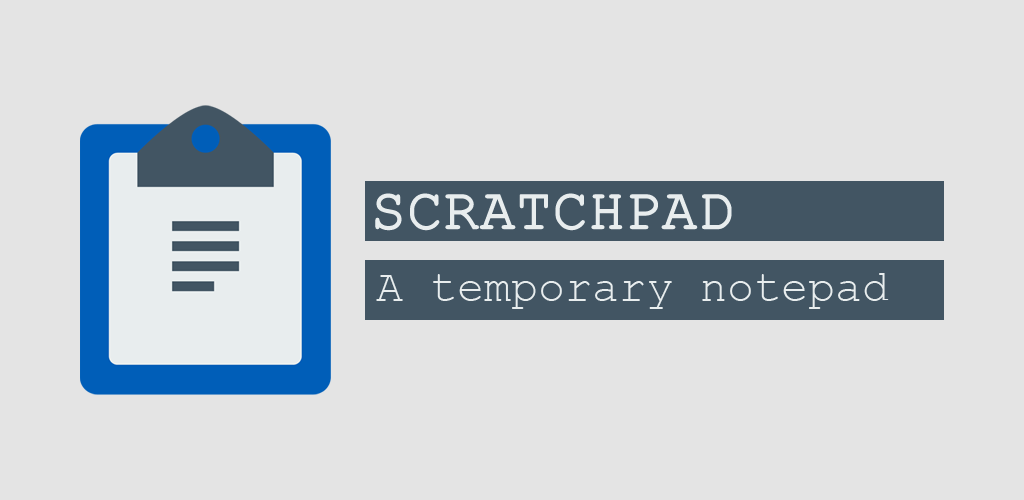
<style>
.page{position:relative;width:1024px;height:500px;background:#e4e4e4}
.page>*{position:absolute;margin:0}
.t1{font:58px "CourierNewPSMT";color:#e8edee;font-weight:bold}
.t2{font:45px "CourierNewPSMT";color:#e8edee}
</style>
<div class="page">
<p class="t1" style="left:375px;top:193px;width:357px;height:38px">SCRATCHPAD</p>
<p class="t2" style="left:376px;top:273px;width:513px;height:36px">A temporary notepad</p>
</div>
